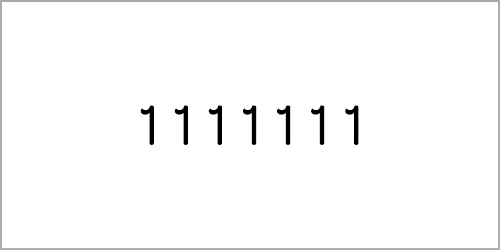
<style>
.page{position:relative;width:500px;height:250px;background:#ffffff}
.page>*{position:absolute;margin:0}
.t1{font:59.4px "Omnes";letter-spacing:0.2em;color:#000000;font-weight:bold}
</style>
<div class="page">
<p class="t1" style="left:140px;top:105px;width:219px;height:40px">1111111</p>
</div>
